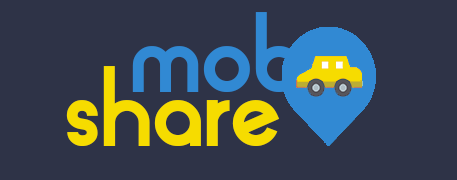
<style>
.page{position:relative;width:457px;height:180px;background:#2e3347}
.page>*{position:absolute;margin:0}
.t1{font:100px "AlpacaScarlettDemo";color:#3189d3}
.t2{font:100px "AlpacaScarlettDemo";color:#f6dc00}
</style>
<div class="page">
<p class="t1" style="left:132px;top:12px;width:170px;height:80px">mob</p>
<p class="t2" style="left:66px;top:66px;width:214px;height:80px">share</p>
</div>
